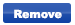
<style>
.page{position:relative;width:75px;height:25px;background:#ffffff}
.page>*{position:absolute;margin:0}
.t1{font:11.2px "Arial-Black";color:#ffffff}
</style>
<div class="page">
<p class="t1" style="left:14px;top:9px;width:48px;height:10px">Remove</p>
</div>
